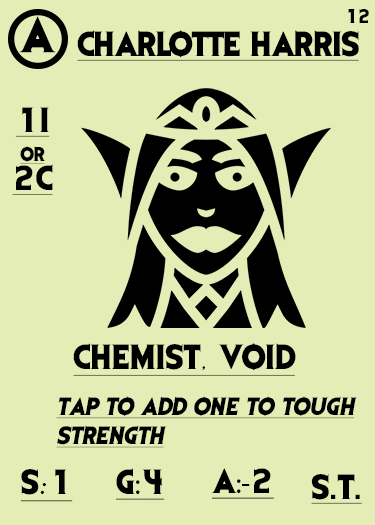
<style>
.page{position:relative;width:375px;height:525px;background:#e3edb5}
.page>*{position:absolute;margin:0}
.t1{font:41.7px "EvilDead";letter-spacing:-0.05em;color:#000000}
.t2{font:16.7px "EvilDead";letter-spacing:-0.05em;color:#000000}
.t3{font:29.2px "EvilDead";letter-spacing:-0.025em;color:#000000;text-decoration:underline}
.t4{font:29.2px/29.2px "EvilDead";color:#000000;text-decoration:underline}
.t5{font:16.7px/29.2px "EvilDead";color:#000000;text-decoration:underline}
.t6{font:29.2px "EvilDead";color:#000000;text-decoration:underline}
.t7{font:29.2px "Fadli-Script";color:#000000;text-decoration:underline}
.t8{font:20.8px/29.2px "EvilDead";color:#000000;font-style:italic;text-decoration:underline}
.t9{font:29.2px "MyriadPro-Regular";color:#000000;text-decoration:underline}
</style>
<div class="page">
<p class="t1" style="left:19px;top:16px;width:37px;height:37px">A</p>
<p class="t2" style="left:348px;top:9px;width:21px;height:14px">12</p>
<p class="t3" style="left:77px;top:30px;width:282px;height:31px">CHARLOTTE HARRIS</p>
<p class="t4" style="left:12px;top:107px;width:41px;height:88px;text-align:center">1I<br><span class="t5">or<br></span>2C</p>
<p class="t6" style="left:73px;top:343px;width:223px;height:33px">CHEMIST<span class="t7">,</span> VOID</p>
<p class="t8" style="left:56px;top:396px;width:301px;height:52px">Tap to add one to tough<br>strength</p>
<p class="t6" style="left:21px;top:469px;width:52px;height:33px">S<span class="t7">:</span>1</p>
<p class="t6" style="left:116px;top:468px;width:49px;height:32px">G<span class="t9">:</span>4</p>
<p class="t9" style="left:211px;top:468px;width:63px;height:31px"><span class="t6">A</span>:-<span class="t6">2</span></p>
<p class="t6" style="left:311px;top:474px;width:51px;height:30px">S.T.</p>
</div>
